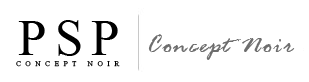
<style>
.page{position:relative;width:309px;height:82px;background:#ffffff}
.page>*{position:absolute;margin:0}
.t1{font:51px "TimesNewRomanPSMT";letter-spacing:0.16em;color:#000000}
.t2{font:27px "Soubrette";letter-spacing:0.08em;color:#6d6d6d}
.t3{font:7px "TimesNewRomanPSMT";letter-spacing:0.68em;color:#000000}
</style>
<div class="page">
<p class="t1" style="left:18px;top:20px;width:100px;height:36px">PSP</p>
<p class="t2" style="left:148px;top:34px;width:147px;height:26px">Concept Noir</p>
<p class="t3" style="left:16px;top:61px;width:104px;height:6px">CONCEPT NOIR</p>
</div>
